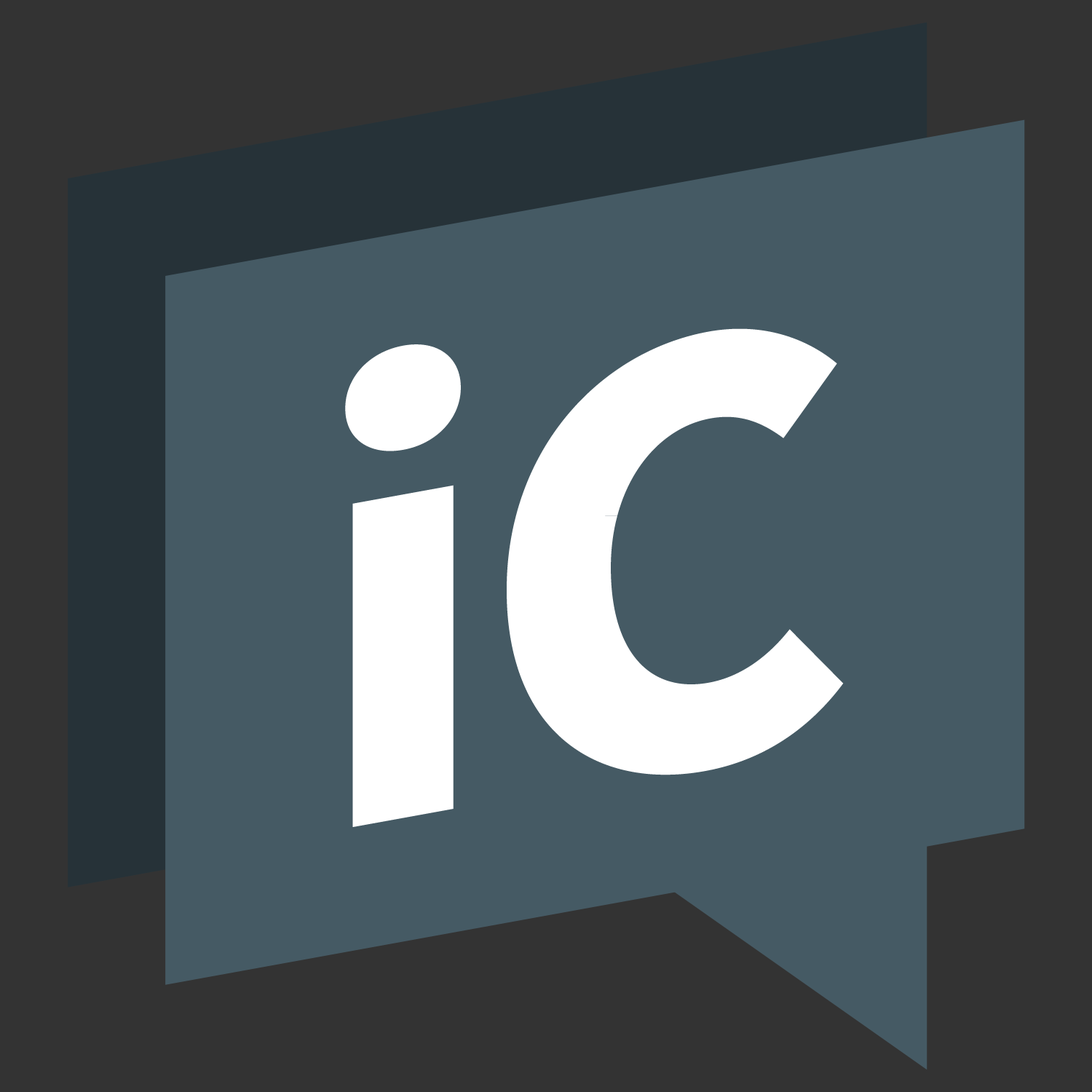
<style>
.page{position:relative;width:1092px;height:1092px;background:#455a64}
.page>*{position:absolute;margin:0}
.t1{font:568.3px "NotoSansCJKkr-Black";letter-spacing:-0.03em;color:#ffffff}
</style>
<div class="page">
<p class="t1" style="left:345px;top:328px;width:499px;height:499px;rotate:-10deg">iC</p>
</div>
